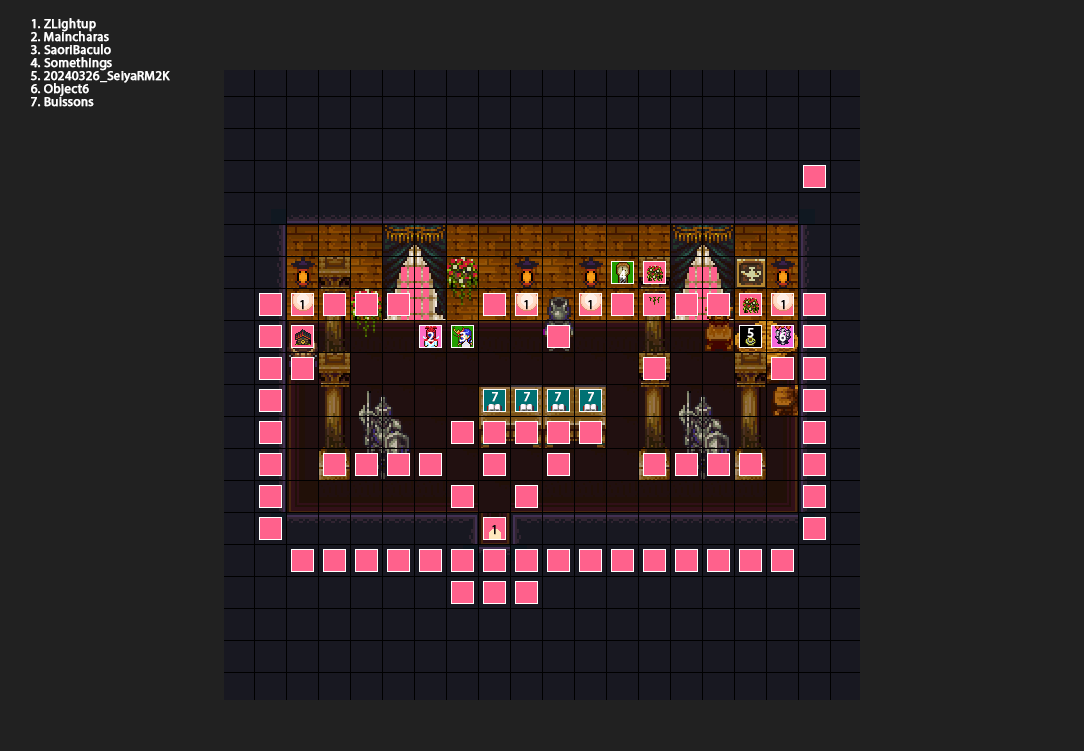
<style>
.page{position:relative;width:1084px;height:751px;background:#212121}
.page>*{position:absolute;margin:0}
.t1{font:13px "MyriadPro-Regular";color:#ffffff;font-weight:bold}
.t2{font:13px "MyriadPro-Regular";color:#090808;font-weight:bold}
</style>
<div class="page">
<p class="t1" style="left:31px;top:18px;width:65px;height:14px">1. ZLightup</p>
<p class="t1" style="left:31px;top:31px;width:78px;height:11px">2. Maincharas</p>
<p class="t1" style="left:30px;top:44px;width:81px;height:11px">3. SaoriBaculo</p>
<p class="t1" style="left:30px;top:57px;width:82px;height:14px">4. Somethings</p>
<p class="t1" style="left:30px;top:71px;width:140px;height:12px">5. 20240326_SeiyaRM2K</p>
<p class="t1" style="left:31px;top:83px;width:58px;height:14px">6. Object6</p>
<p class="t1" style="left:31px;top:97px;width:63px;height:10px">7. Buissons</p>
<p class="t1" style="left:619px;top:270px;width:7px;height:10px">4</p>
<p class="t2" style="left:300px;top:300px;width:4px;height:10px">1</p>
<p class="t2" style="left:524px;top:300px;width:4px;height:10px">1</p>
<p class="t2" style="left:588px;top:300px;width:4px;height:10px">1</p>
<p class="t2" style="left:781px;top:300px;width:4px;height:10px">1</p>
<p class="t1" style="left:747px;top:328px;width:7px;height:10px">5</p>
<p class="t1" style="left:427px;top:332px;width:7px;height:10px">2</p>
<p class="t1" style="left:459px;top:332px;width:7px;height:10px">3</p>
<p class="t1" style="left:779px;top:332px;width:7px;height:10px">6</p>
<p class="t1" style="left:492px;top:392px;width:6px;height:10px">7</p>
<p class="t1" style="left:524px;top:392px;width:6px;height:10px">7</p>
<p class="t1" style="left:555px;top:392px;width:6px;height:10px">7</p>
<p class="t1" style="left:588px;top:392px;width:6px;height:10px">7</p>
<p class="t2" style="left:492px;top:525px;width:4px;height:10px">1</p>
</div>
